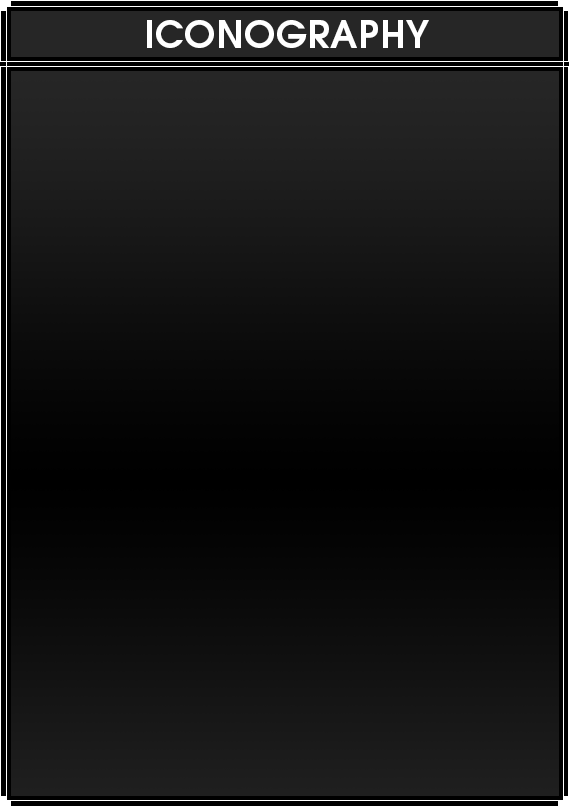
<style>
.page{position:relative;width:569px;height:807px}
.page>*{position:absolute;margin:0}
.t1{font:37px "ITCAvantGardePro-Demi";letter-spacing:0.02em;color:#ffffff;text-transform:uppercase}
</style>
<div class="page">
<p class="t1" style="left:147px;top:20px;width:282px;height:28px">iconography</p>
</div>
